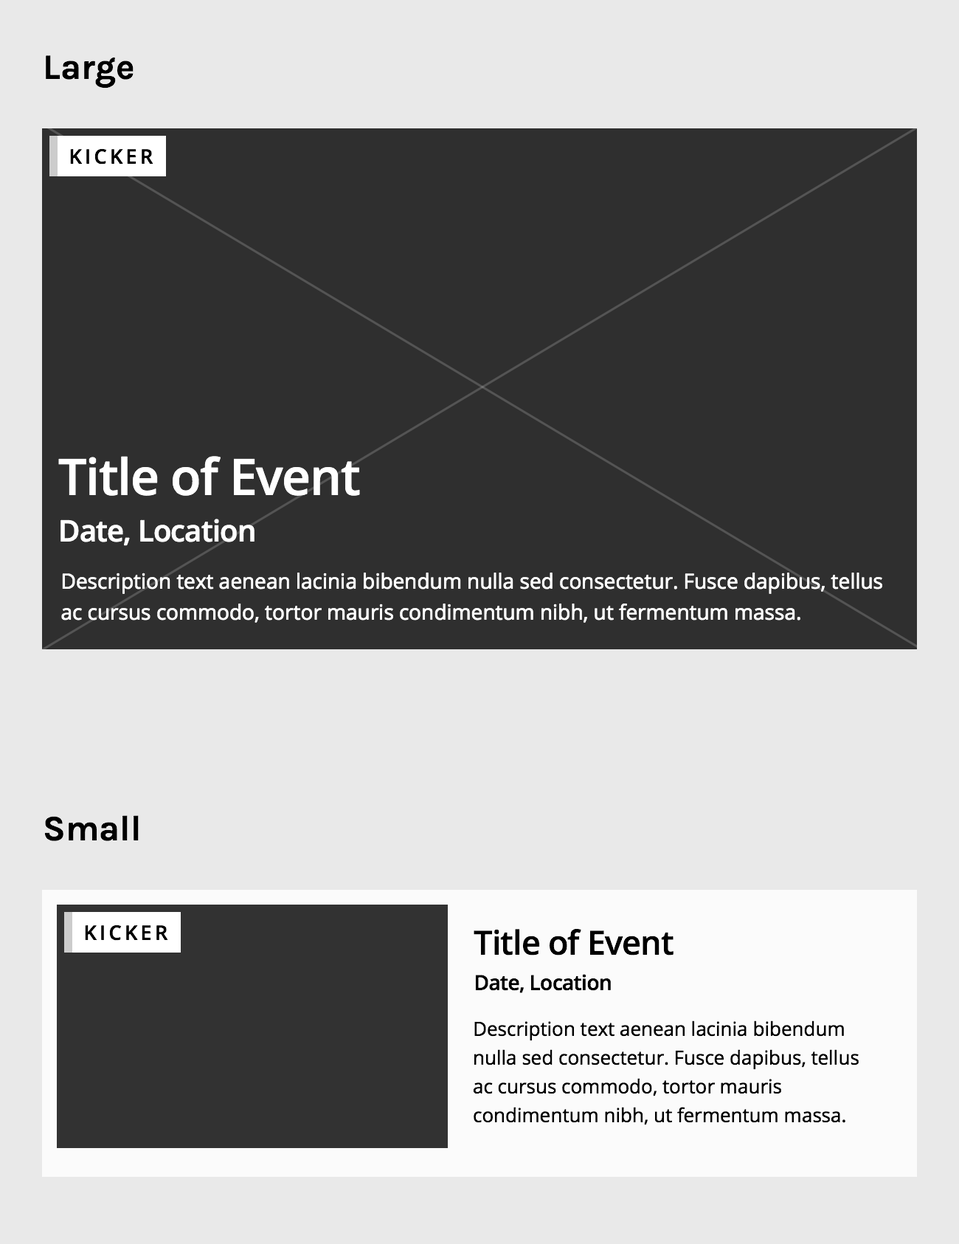
<style>
.page{position:relative;width:959px;height:1244px;background:#e9e9e9}
.page>*{position:absolute;margin:0}
.t1{font:35.4px "Karla-Bold";color:#000000}
.t2{font:19.9px "OpenSans-Semibold";letter-spacing:0.16em;color:#000000;text-transform:uppercase}
.t3{font:50.2px/36.1px "OpenSans-Semibold";letter-spacing:-0.02em;color:#ffffff}
.t4{font:29.5px/46.5px "OpenSans-Semibold";letter-spacing:-0.02em;color:#ffffff}
.t5{font:20.7px/31px "OpenSans";color:#ffffff}
.t6{font:33.2px/25.1px "OpenSans-Semibold";letter-spacing:-0.02em;color:#000000}
.t7{font:20.7px/35.4px "OpenSans-Semibold";letter-spacing:-0.02em;color:#000000}
.t8{font:19.2px/28.8px "OpenSans";color:#000000}
</style>
<div class="page">
<p class="t1" style="left:46px;top:55px;width:88px;height:34px">Large</p>
<p class="t2" style="left:70px;top:148px;width:83px;height:16px">kicker</p>
<p class="t3" style="left:58px;top:456px;width:302px;height:90px">Title of Event<br><span class="t4">Date, Location</span></p>
<p class="t5" style="left:61px;top:572px;width:821px;height:51px">Description text aenean lacinia bibendum nulla sed consectetur. Fusce dapibus, tellus ac cursus commodo, tortor mauris condimentum nibh, ut fermentum massa.</p>
<p class="t1" style="left:44px;top:815px;width:95px;height:26px">Small</p>
<p class="t2" style="left:85px;top:924px;width:83px;height:16px">kicker</p>
<p class="t6" style="left:474px;top:929px;width:199px;height:64px">Title of Event<br><span class="t7">Date, Location</span></p>
<p class="t8" style="left:473px;top:1020px;width:386px;height:105px">Description text aenean lacinia bibendum nulla sed consectetur. Fusce dapibus, tellus ac cursus commodo, tortor mauris condimentum nibh, ut fermentum massa.</p>
</div>
